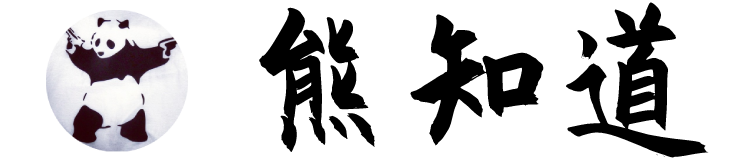
<style>
.page{position:relative;width:730px;height:160px;background:#ffffff}
.page>*{position:absolute;margin:0}
.t1{font:160px "PangMenZhengDao-Cu";color:#000000}
</style>
<div class="page">
<p class="t1" style="left:258px;top:2px;width:451px;height:156px">熊知道</p>
</div>
